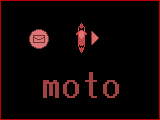
<style>
.page{position:relative;width:160px;height:120px;background:#000000}
.page>*{position:absolute;margin:0}
.t1{font:36px "Terminal";color:#a24141}
</style>
<div class="page">
<p class="t1" style="left:43px;top:72px;width:76px;height:26px">moto</p>
</div>
